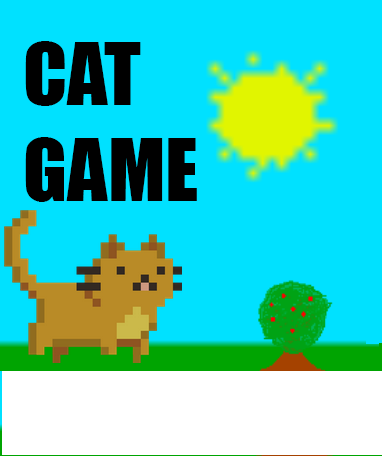
<style>
.page{position:relative;width:382px;height:456px;background:#00e1ff}
.page>*{position:absolute;margin:0}
.t1{font:80px "Impact";color:#000000}
</style>
<div class="page">
<p class="t1" style="left:25px;top:41px;width:172px;height:161px">CAT<br>GAME</p>
</div>
